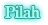
<style>
.page{position:relative;width:48px;height:25px}
.page>*{position:absolute;margin:0}
.t1{font:16px "RyuminPro-ExBold";letter-spacing:-0.08em;color:#9cffed}
</style>
<div class="page">
<p class="t1" style="left:5px;top:5px;width:35px;height:14px">Pilah</p>
</div>
